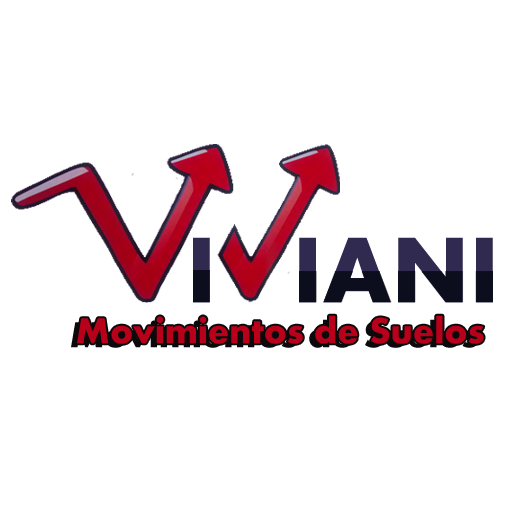
<style>
.page{position:relative;width:512px;height:512px;background:#ffffff}
.page>*{position:absolute;margin:0}
.t1{font:96.7px "Aharoni-Bold"}
.t2{font:37.5px "Aharoni-Bold";color:#b9001a}
</style>
<div class="page">
<p class="t1" style="left:193px;top:237px;width:17px;height:66px">I</p>
<p class="t1" style="left:299px;top:237px;width:194px;height:66px">IANI</p>
<p class="t2" style="left:77px;top:315px;width:407px;height:29px">Movimientos de Suelos</p>
</div>
